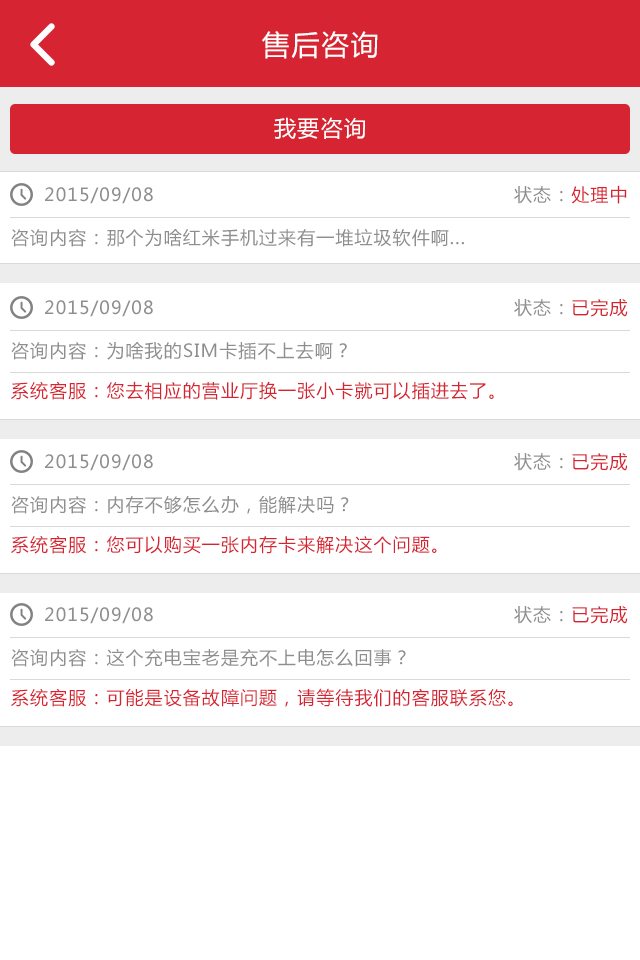
<style>
.page{position:relative;width:640px;height:960px;background:#ffffff}
.page>*{position:absolute;margin:0}
.t1{font:28px "MicrosoftYaHei";letter-spacing:0.06em;color:#ffffff}
.t2{font:22px "MicrosoftYaHei";letter-spacing:0.06em;color:#ffffff}
.t3{font:18px "MicrosoftYaHei";letter-spacing:0.06em;color:#8e8e8e}
.t4{font:18px "MicrosoftYaHei";letter-spacing:0.06em;color:#d62432}
</style>
<div class="page">
<p class="t1" style="left:262px;top:31px;width:116px;height:28px">售后咨询</p>
<p class="t2" style="left:274px;top:117px;width:91px;height:22px">我要咨询</p>
<p class="t3" style="left:514px;top:185px;width:113px;height:19px">状态：<span class="t4">处理中</span></p>
<p class="t3" style="left:45px;top:187px;width:108px;height:17px">2015/09/08</p>
<p class="t3" style="left:11px;top:228px;width:453px;height:19px">咨询内容：那个为啥红米手机过来有一堆垃圾软件啊...</p>
<p class="t3" style="left:45px;top:300px;width:108px;height:17px">2015/09/08</p>
<p class="t3" style="left:514px;top:299px;width:114px;height:18px">状态：<span class="t4">已完成</span></p>
<p class="t3" style="left:11px;top:341px;width:336px;height:19px">咨询内容：为啥我的SIM卡插不上去啊？</p>
<p class="t4" style="left:11px;top:381px;width:483px;height:19px">系统客服：您去相应的营业厅换一张小卡就可以插进去了。</p>
<p class="t3" style="left:45px;top:454px;width:108px;height:17px">2015/09/08</p>
<p class="t3" style="left:514px;top:453px;width:114px;height:18px">状态：<span class="t4">已完成</span></p>
<p class="t3" style="left:11px;top:495px;width:338px;height:19px">咨询内容：内存不够怎么办，能解决吗？</p>
<p class="t4" style="left:11px;top:535px;width:426px;height:19px">系统客服：您可以购买一张内存卡来解决这个问题。</p>
<p class="t3" style="left:514px;top:606px;width:114px;height:18px">状态：<span class="t4">已完成</span></p>
<p class="t3" style="left:45px;top:607px;width:108px;height:17px">2015/09/08</p>
<p class="t3" style="left:11px;top:649px;width:395px;height:18px">咨询内容：这个充电宝老是充不上电怎么回事？</p>
<p class="t4" style="left:11px;top:688px;width:502px;height:19px">系统客服：可能是设备故障问题，请等待我们的客服联系您。</p>
</div>
